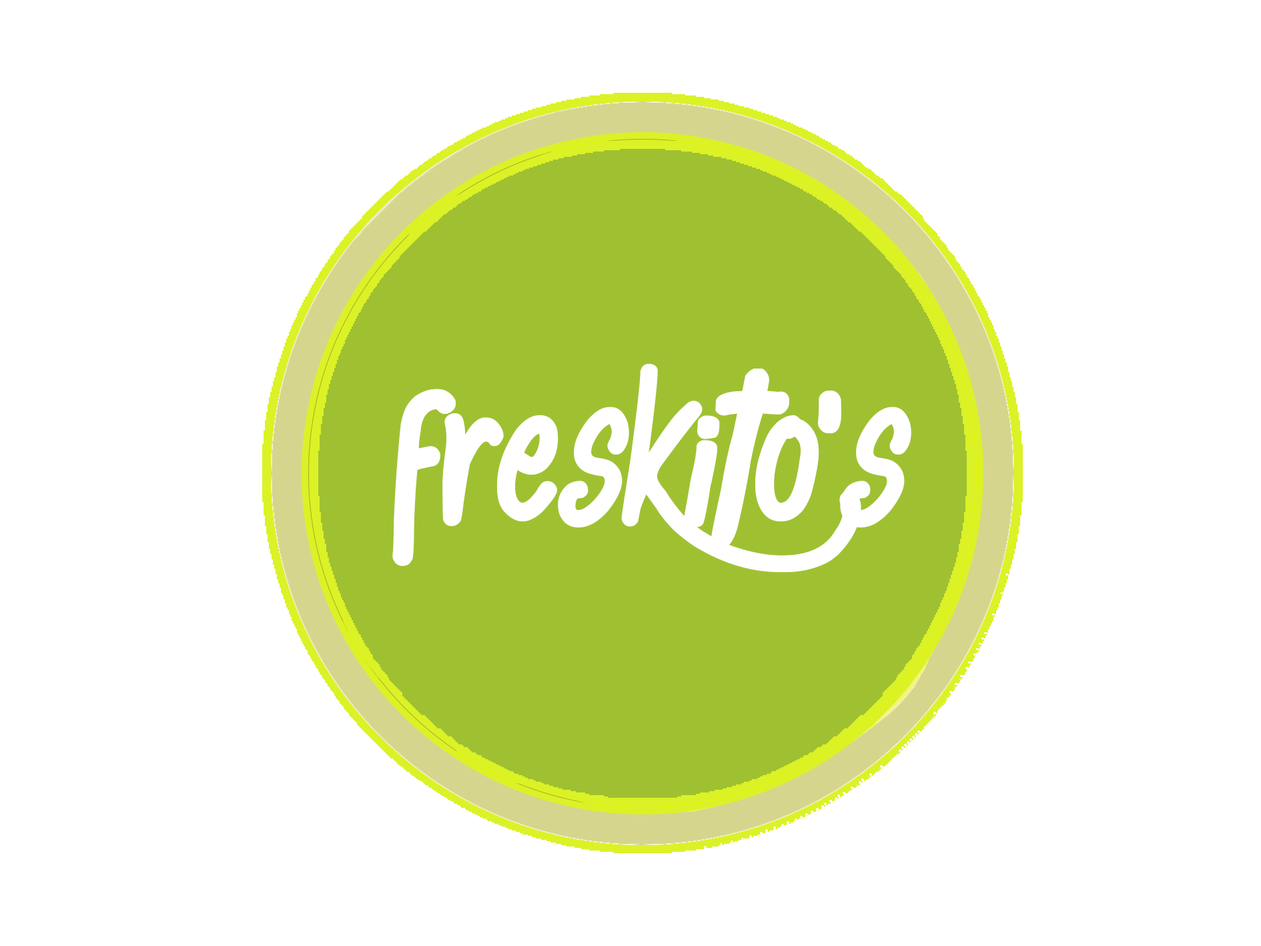
<style>
.page{position:relative;width:1261px;height:946px;background:#ffffff}
.page>*{position:absolute;margin:0}
.t1{font:117px "alkisah";color:#ffffff}
</style>
<div class="page">
<p class="t1" style="left:392px;top:364px;width:519px;height:208px">FRESKITO'S</p>
</div>
